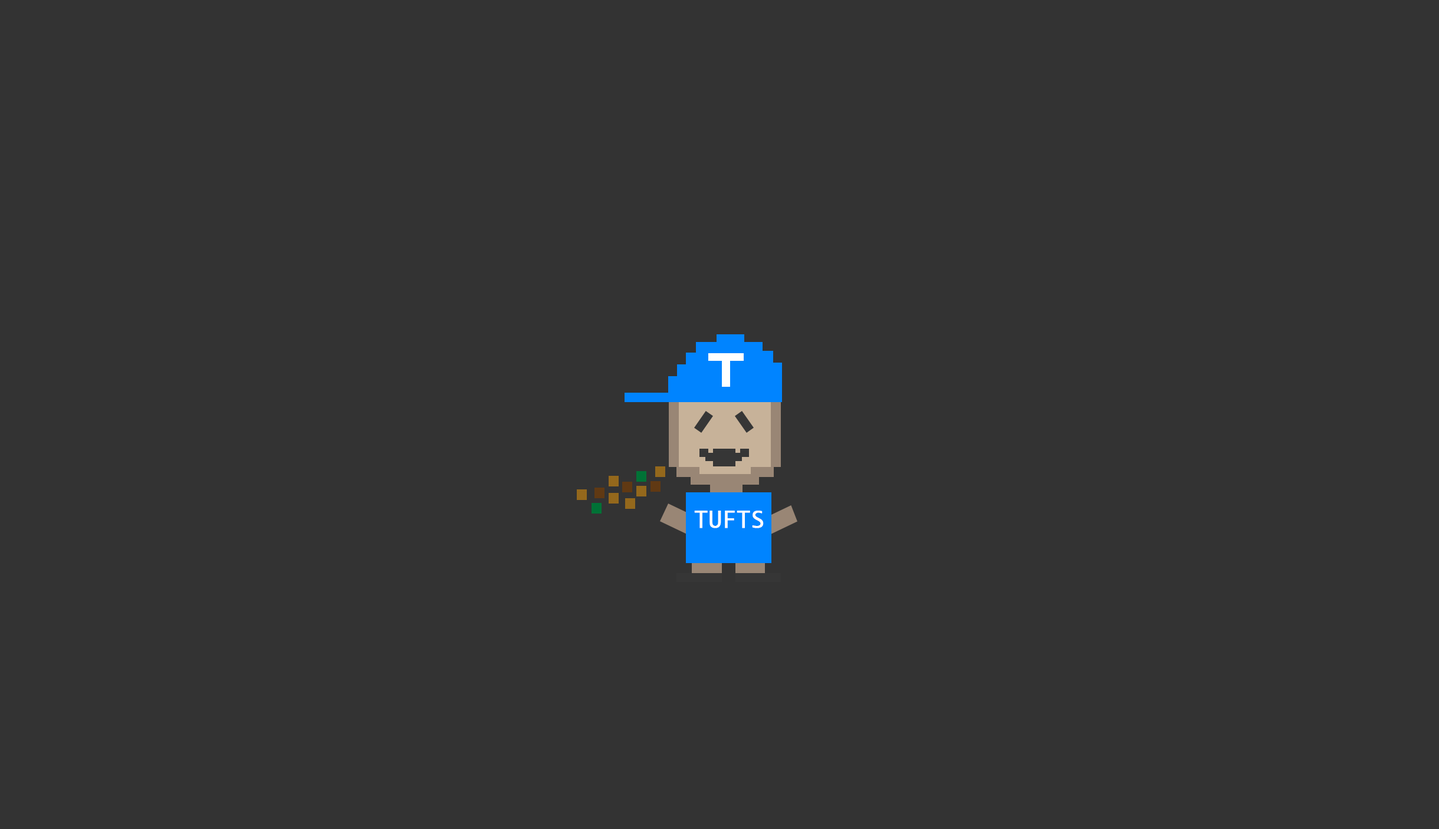
<style>
.page{position:relative;width:1439px;height:829px;background:#333333}
.page>*{position:absolute;margin:0}
.t1{font:22.1px "Monaco";letter-spacing:0.012em;color:#ffffff;font-weight:bold}
</style>
<div class="page">
<p class="t1" style="left:694px;top:511px;width:69px;height:17px">TUFTS</p>
</div>
